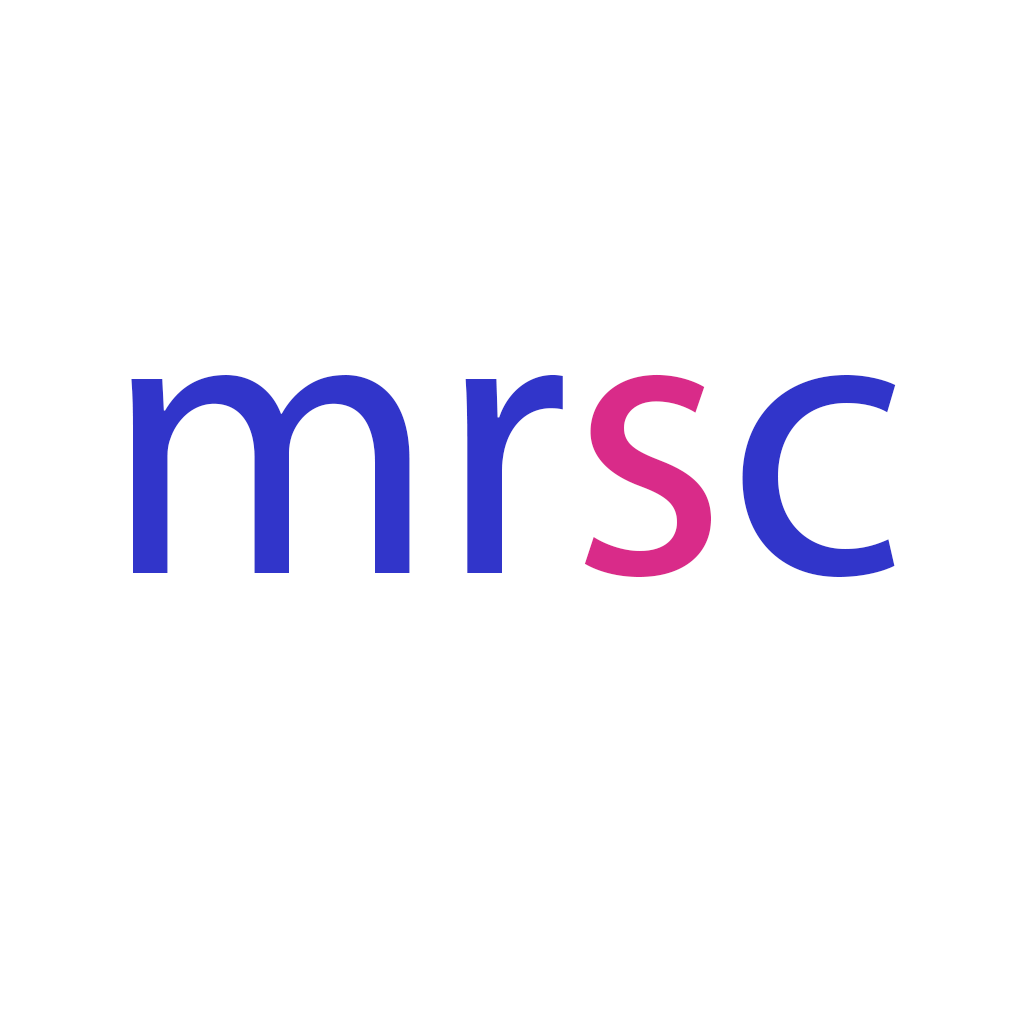
<style>
.page{position:relative;width:1024px;height:1024px;background:#ffffff}
.page>*{position:absolute;margin:0}
.t1{font:400px "MyriadPro-Regular";color:#3135ca}
.t2{font:400px "MyriadPro-Regular";color:#d92b89}
</style>
<div class="page">
<p class="t1" style="left:131px;top:374px;width:765px;height:203px">mr<span class="t2">s</span>c</p>
</div>
